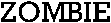
<style>
.page{position:relative;width:111px;height:23px;background:#ffffff}
.page>*{position:absolute;margin:0}
.t1{font:29.7px "Rockwell";color:#000000}
</style>
<div class="page">
<p class="t1" style="left:1px;top:1px;width:109px;height:21px">ZOMBIE</p>
</div>
